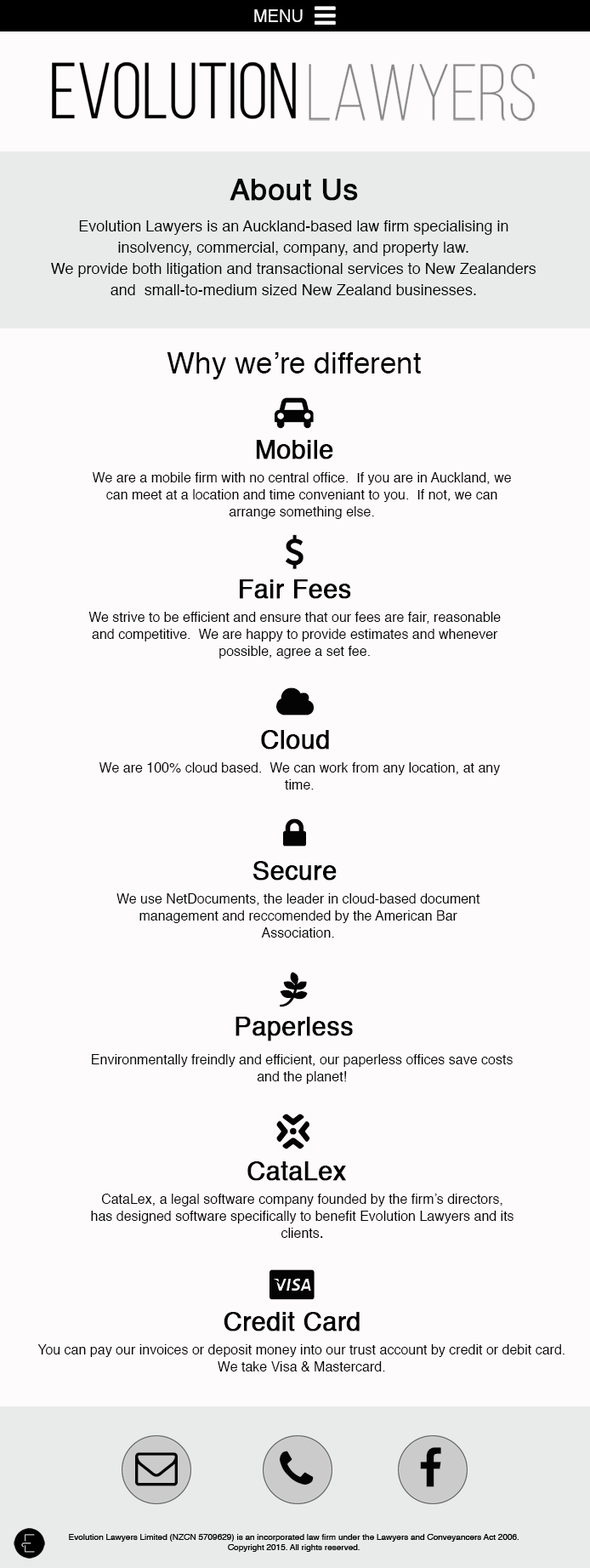
<style>
.page{position:relative;width:590px;height:1568px;background:#fdfbfb}
.page>*{position:absolute;margin:0}
.t1{font:17px "Helvetica";color:#fdfcfc}
.t2{font:29.8px "Helvetica";color:#040404;font-weight:bold}
.t3{font:15.3px/21.3px "Helvetica";color:#040404}
.t4{font:29.8px "Helvetica";color:#040404}
.t5{font:13.6px/17px "Helvetica";color:#040404}
.t6{font:25.5px "Helvetica";color:#040404;font-weight:bold}
.t7{font:34px "FontAwesome";color:#040404;font-weight:bold}
.t8{font:15.3px/17px "Helvetica";color:#040404}
</style>
<div class="page">
<p class="t1" style="left:254px;top:9px;width:49px;height:13px">MENU</p>
<p class="t2" style="left:230px;top:179px;width:128px;height:22px">About Us</p>
<p class="t3" style="left:51px;top:220px;width:485px;height:75px;text-align:center">Evolution Lawyers is an Auckland-based law firm specialising in <br>insolvency, commercial, company, and property law.  <br>We provide both litigation and transactional services to New Zealanders and  small-to-medium sized New Zealand businesses.</p>
<p class="t4" style="left:167px;top:352px;width:254px;height:27px">Why we’re different</p>
<p class="t5" style="left:93px;top:472px;width:418px;height:47px;text-align:center">We are a mobile firm with no central office.  If you are in Auckland, we can meet at a location and time conveniant to you.  If not, we can arrange something else.</p>
<p class="t5" style="left:88px;top:612px;width:413px;height:47px;text-align:center">We strive to be efficient and ensure that our fees are fair, reasonable and competitive.  We are happy to provide estimates and whenever possible, agree a set fee.</p>
<p class="t5" style="left:100px;top:762px;width:400px;height:28px;text-align:center">We are 100% cloud based.  We can work from any location, at any time.</p>
<p class="t5" style="left:117px;top:893px;width:364px;height:45px;text-align:center">We use NetDocuments, the leader in cloud-based document <br>management and reccomended by the American Bar <br>Association.</p>
<p class="t5" style="left:92px;top:1054px;width:421px;height:30px;text-align:center">Environmentally freindly and efficient, our paperless offices save costs and the planet!</p>
<p class="t6" style="left:248px;top:1161px;width:98px;height:20px"><span class="t7">  </span>CataLex</p>
<p class="t5" style="left:91px;top:1194px;width:423px;height:44px;text-align:center">CataLex, a legal software company founded by the firm’s directors, has designed software specifically to benefit Evolution Lawyers and its clients<span class="t8">.</span></p>
<p class="t5" style="left:37px;top:1344px;width:528px;height:27px;text-align:center">You can pay our invoices or deposit money into our trust account by credit or debit card.  We take Visa &amp; Mastercard.</p>
</div>
